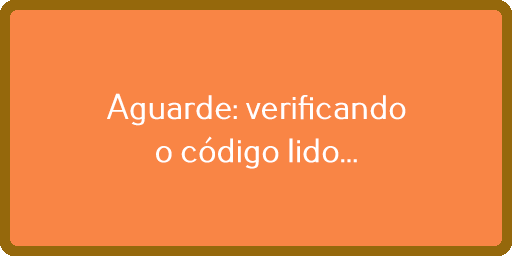
<style>
.page{position:relative;width:512px;height:256px;background:#f98545}
.page>*{position:absolute;margin:0}
.t1{font:36px "Pfennig";color:#ffffff}
</style>
<div class="page">
<p class="t1" style="left:107px;top:93px;width:299px;height:76px;text-align:center">Aguarde: verificando<br>o código lido...</p>
</div>
